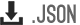
<style>
.page{position:relative;width:80px;height:25px;background:#ffffff}
.page>*{position:absolute;margin:0}
.t1{font:25.3px "OstrichSans-Black";color:#636363}
</style>
<div class="page">
<p class="t1" style="left:32px;top:4px;width:44px;height:19px">.JSON</p>
</div>
